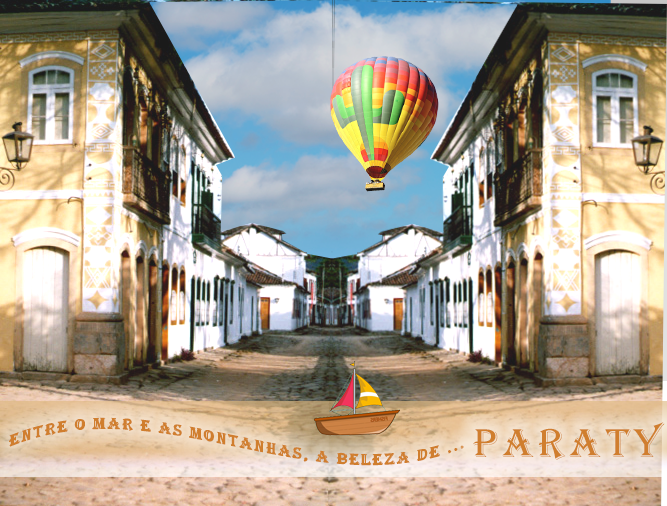
<style>
.page{position:relative;width:667px;height:506px}
.page>*{position:absolute;margin:0}
.t1{font:16.7px "Algerian";letter-spacing:0.11em;color:#d07e2e}
.t2{font:41.7px "Algerian";letter-spacing:0.11em;color:#d07e2e}
</style>
<div class="page">
<p class="t1" style="left:9px;top:417px;width:455px;height:49px;text-align:center">entre o mar e as montanhas, a beleza de ...</p>
<p class="t2" style="left:473px;top:422px;width:192px;height:38px">Paraty</p>
</div>
